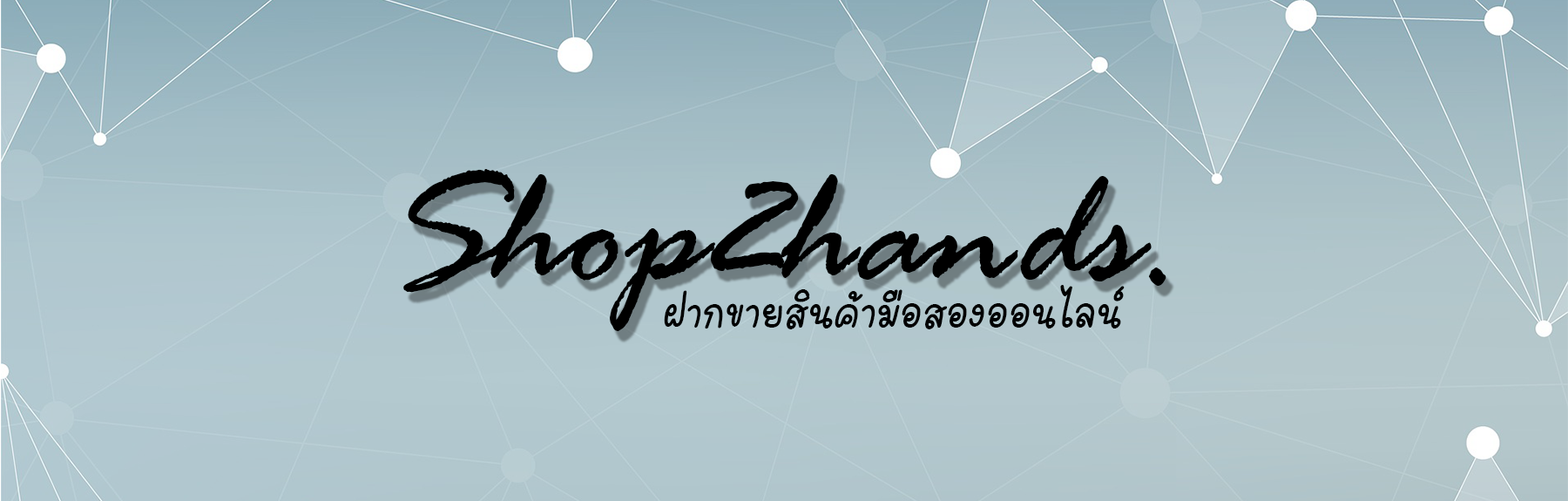
<style>
.page{position:relative;width:1568px;height:501px}
.page>*{position:absolute;margin:0}
.t1{font:170.4px "RageItalic";color:#000000}
.t2{font:58.8px "FCMuffinItalic";color:#000000}
</style>
<div class="page">
<p class="t1" style="left:403px;top:169px;width:763px;height:162px">Shop2hands.</p>
<p class="t2" style="left:664px;top:285px;width:461px;height:44px">ฝากขายสินค้ามือสองออนไลน์</p>
</div>
